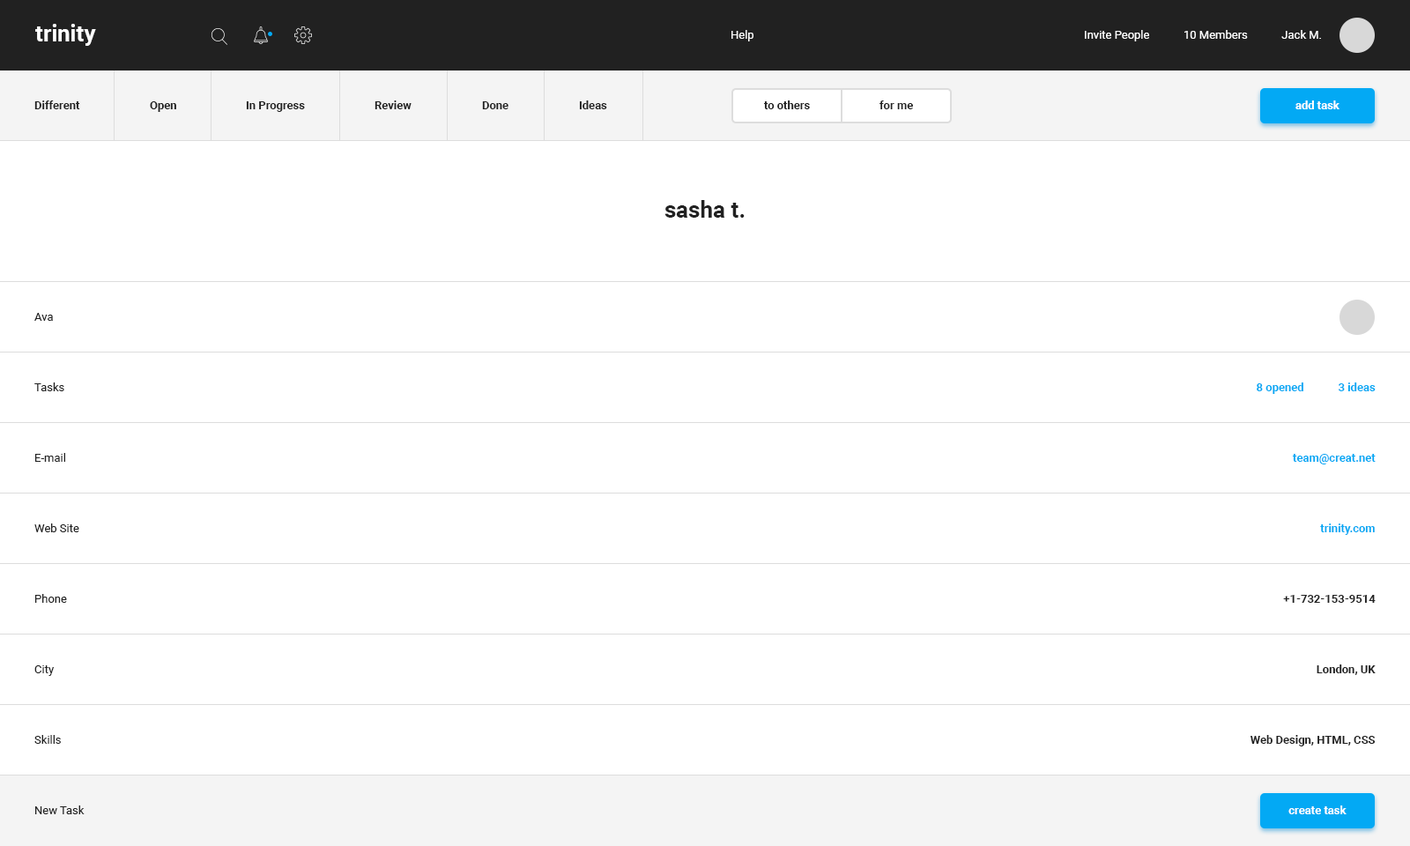
<style>
.page{position:relative;width:1410px;height:846px;background:#ffffff}
.page>*{position:absolute;margin:0}
.t1{font:22.9px "Roboto-Bold";color:#ffffff}
.t2{font:11.5px "Roboto-Regular";color:#ffffff}
.t3{font:11.5px "Roboto-Bold";color:#212121}
.t4{font:11.5px "Roboto-Bold";color:#ffffff}
.t5{font:22.9px "Roboto-Bold";color:#212121}
.t6{font:11.5px "Roboto-Regular";color:#212121}
.t7{font:11.5px "Roboto-Bold";color:#03a9f4}
</style>
<div class="page">
<p class="t1" style="left:35px;top:24px;width:61px;height:22px">trinity</p>
<p class="t2" style="left:731px;top:30px;width:22px;height:11px">Help</p>
<p class="t2" style="left:1085px;top:30px;width:236px;height:11px">Invite People            10 Members            Jack M.</p>
<p class="t3" style="left:34px;top:100px;width:46px;height:9px">Different</p>
<p class="t3" style="left:34px;top:100px;width:46px;height:9px">Different</p>
<p class="t3" style="left:150px;top:101px;width:26px;height:11px">Open</p>
<p class="t3" style="left:150px;top:101px;width:26px;height:11px">Open</p>
<p class="t3" style="left:246px;top:101px;width:59px;height:11px">In Progress</p>
<p class="t3" style="left:246px;top:101px;width:59px;height:11px">In Progress</p>
<p class="t3" style="left:374px;top:100px;width:37px;height:9px">Review</p>
<p class="t3" style="left:374px;top:100px;width:37px;height:9px">Review</p>
<p class="t3" style="left:482px;top:101px;width:26px;height:8px">Done</p>
<p class="t3" style="left:482px;top:101px;width:26px;height:8px">Done</p>
<p class="t3" style="left:579px;top:100px;width:28px;height:9px">Ideas</p>
<p class="t3" style="left:579px;top:100px;width:28px;height:9px">Ideas</p>
<p class="t3" style="left:763px;top:100px;width:47px;height:9px">to others</p>
<p class="t3" style="left:763px;top:100px;width:47px;height:9px">to others</p>
<p class="t3" style="left:879px;top:100px;width:34px;height:9px">for me</p>
<p class="t3" style="left:879px;top:100px;width:34px;height:9px">for me</p>
<p class="t4" style="left:1295px;top:100px;width:44px;height:9px">add task</p>
<p class="t4" style="left:1295px;top:100px;width:44px;height:9px">add task</p>
<p class="t5" style="left:664px;top:200px;width:81px;height:18px">sasha t.</p>
<p class="t6" style="left:34px;top:313px;width:19px;height:8px">Ava</p>
<p class="t6" style="left:34px;top:382px;width:30px;height:9px">Tasks</p>
<p class="t7" style="left:1256px;top:382px;width:119px;height:12px">8 opened            3 ideas</p>
<p class="t6" style="left:35px;top:453px;width:30px;height:9px">E-mail</p>
<p class="t7" style="left:1292px;top:454px;width:83px;height:10px">team@creat.net</p>
<p class="t6" style="left:34px;top:523px;width:45px;height:9px">Web Site</p>
<p class="t7" style="left:1320px;top:523px;width:55px;height:12px">trinity.com</p>
<p class="t6" style="left:35px;top:594px;width:32px;height:9px">Phone</p>
<p class="t3" style="left:1283px;top:595px;width:92px;height:8px">+1-732-153-9514</p>
<p class="t6" style="left:34px;top:665px;width:21px;height:11px">City</p>
<p class="t3" style="left:1316px;top:664px;width:59px;height:11px">London, UK</p>
<p class="t6" style="left:34px;top:735px;width:27px;height:9px">Skills</p>
<p class="t3" style="left:1250px;top:735px;width:125px;height:11px">Web Design, HTML, CSS</p>
<p class="t6" style="left:35px;top:805px;width:50px;height:9px">New Task</p>
<p class="t4" style="left:1288px;top:805px;width:58px;height:9px">create task</p>
</div>
